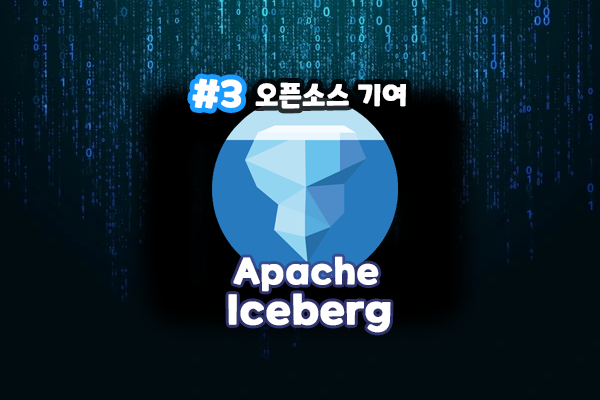
<style>
.page{position:relative;width:600px;height:400px;background:#010c11}
.page>*{position:absolute;margin:0}
.t1{font:36px "ONEMobilePOPRegular";color:#ffffff;font-weight:bold}
.t2{font:28.3px "ONEMobilePOPRegular";color:#ffffff;font-weight:bold}
.t3{font:35.5px "ONEMobilePOPRegular";color:#ffffff;font-weight:bold}
.t4{font:39.9px "ONEMobilePOPRegular";color:#ffffff;font-weight:bold}
</style>
<div class="page">
<p class="t1" style="left:192px;top:78px;width:50px;height:31px">#3</p>
<p class="t2" style="left:255px;top:82px;width:151px;height:27px">오픈소스 기여</p>
<p class="t3" style="left:233px;top:256px;width:146px;height:36px">Apache</p>
<p class="t4" style="left:228px;top:293px;width:163px;height:40px">Iceberg</p>
</div>
